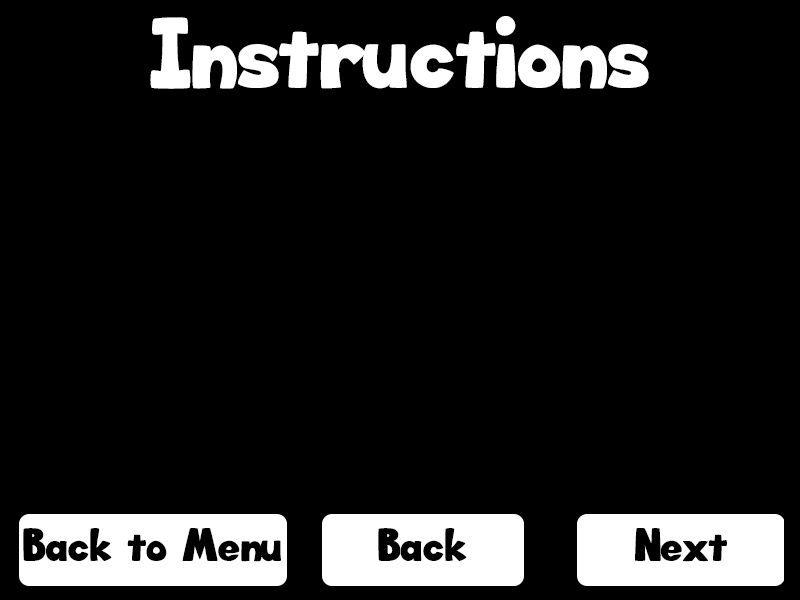
<style>
.page{position:relative;width:800px;height:600px;background:#000000}
.page>*{position:absolute;margin:0}
.t1{font:60px "Big_Bottom_Cartoon";color:#ffffff}
.t2{font:28px "Big_Bottom_Cartoon";color:#000000}
</style>
<div class="page">
<p class="t1" style="left:150px;top:16px;width:499px;height:73px">Instructions</p>
<p class="t2" style="left:23px;top:528px;width:258px;height:34px">Back to Menu</p>
<p class="t2" style="left:378px;top:528px;width:89px;height:33px">Back</p>
<p class="t2" style="left:635px;top:528px;width:92px;height:34px">Next</p>
</div>
